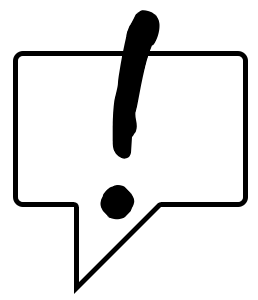
<style>
.page{position:relative;width:258px;height:300px;background:#ffffff}
.page>*{position:absolute;margin:0}
.t1{font:250px "BuxtonSketch";letter-spacing:-0.025em;color:#000000}
</style>
<div class="page">
<p class="t1" style="left:103px;top:13px;width:54px;height:204px">!</p>
</div>
